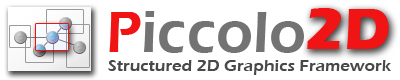
<style>
.page{position:relative;width:400px;height:80px;background:#ffffff}
.page>*{position:absolute;margin:0}
.t1{font:60px "ErasITC-Demi";color:#737373}
.t2{font:60px "ErasITC-Demi";color:#f11414}
.t3{font:60px "ErasITC-Bold";color:#f11414}
.t4{font:17px "ErasITC-Demi";color:#494949}
</style>
<div class="page">
<p class="t1" style="left:109px;top:11px;width:195px;height:42px"><span class="t2">P</span>iccolo</p>
<p class="t3" style="left:307px;top:8px;width:82px;height:41px">2D</p>
<p class="t4" style="left:108px;top:60px;width:283px;height:15px">Structured 2D Graphics Framework</p>
</div>
